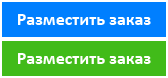
<style>
.page{position:relative;width:168px;height:78px;background:#41bb19}
.page>*{position:absolute;margin:0}
.t1{font:18px "Calibri-Bold";color:#ffffff}
.t2{font:18px "Calibri-Bold";color:#fffefe}
</style>
<div class="page">
<p class="t1" style="left:18px;top:14px;width:133px;height:11px">Разместить заказ</p>
<p class="t2" style="left:18px;top:53px;width:133px;height:11px">Разместить заказ</p>
</div>
